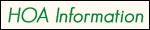
<style>
.page{position:relative;width:150px;height:30px;background:#fffaf0}
.page>*{position:absolute;margin:0}
.t1{font:20px "GeosansLight-Oblique";color:#008135;font-weight:bold}
</style>
<div class="page">
<p class="t1" style="left:8px;top:7px;width:136px;height:16px">HOA Information</p>
</div>
